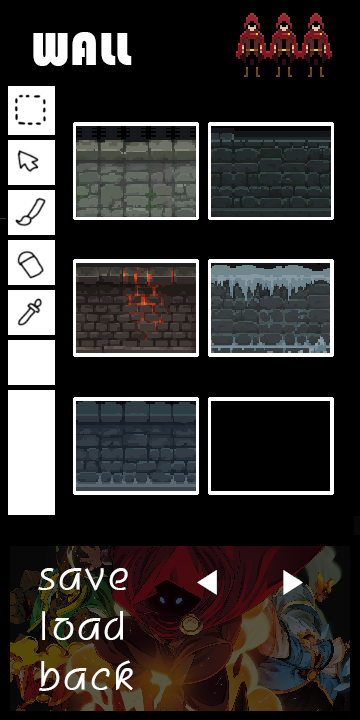
<style>
.page{position:relative;width:360px;height:720px;background:#000000}
.page>*{position:absolute;margin:0}
.t1{font:48px "Bauhaus93";color:#ffffff}
.t2{font:40px "H2porL";color:#ffffff}
.t3{font:32px "Gulim";color:#ffffff}
</style>
<div class="page">
<p class="t1" style="left:33px;top:32px;width:99px;height:34px">WALL</p>
<p class="t2" style="left:38px;top:568px;width:90px;height:23px">save</p>
<p class="t3" style="left:197px;top:570px;width:106px;height:25px">◀     ▶</p>
<p class="t2" style="left:42px;top:611px;width:81px;height:29px">load</p>
<p class="t2" style="left:39px;top:660px;width:94px;height:31px">back</p>
</div>
